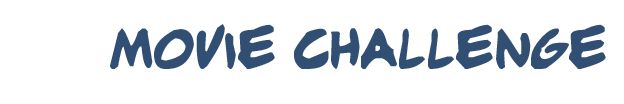
<style>
.page{position:relative;width:624px;height:104px;background:#ffffff}
.page>*{position:absolute;margin:0}
.t1{font:51.9px "adamwarren0.2";color:#304f72}
</style>
<div class="page">
<p class="t1" style="left:110px;top:24px;width:496px;height:45px">Movie Challenge</p>
</div>
